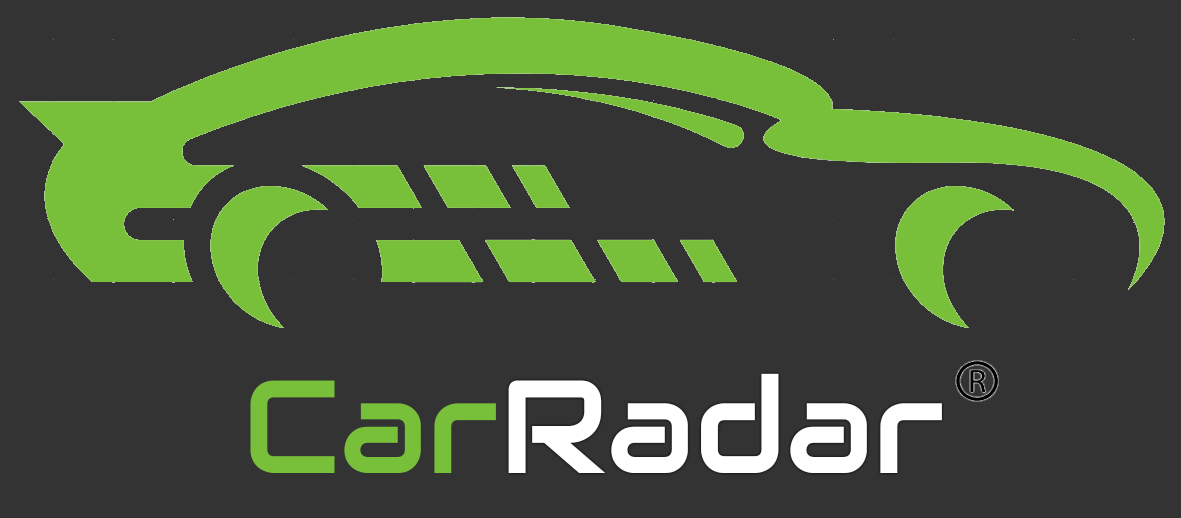
<style>
.page{position:relative;width:1181px;height:518px;background:#333333}
.page>*{position:absolute;margin:0}
.t1{font:132px "Audiowide-Regular";color:#ffffff}
.t2{font:132px "Audiowide-Regular";color:#78bf3a}
</style>
<div class="page">
<p class="t1" style="left:508px;top:373px;width:434px;height:100px">Radar</p>
<p class="t2" style="left:250px;top:380px;width:246px;height:93px">Car</p>
</div>
